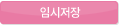
<style>
.page{position:relative;width:120px;height:25px;background:#e97aa4}
.page>*{position:absolute;margin:0}
.t1{font:12.1px "YDIYGO330";color:#ffffff;scale:0.91 1}
</style>
<div class="page">
<p class="t1" style="left:40px;top:7px;width:41px;height:11px">임시저장</p>
</div>
